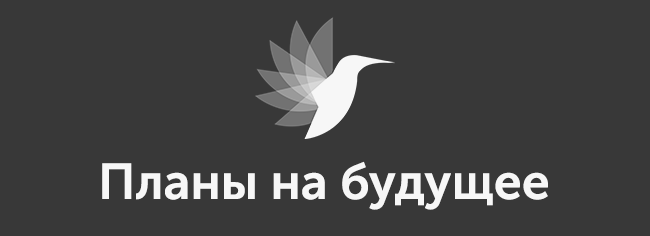
<style>
.page{position:relative;width:650px;height:236px;background:#383838}
.page>*{position:absolute;margin:0}
.t1{font:50px "MuseoSansCyrl-700";color:#f7f7f7}
</style>
<div class="page">
<p class="t1" style="left:102px;top:161px;width:446px;height:49px">Планы на будущее</p>
</div>
